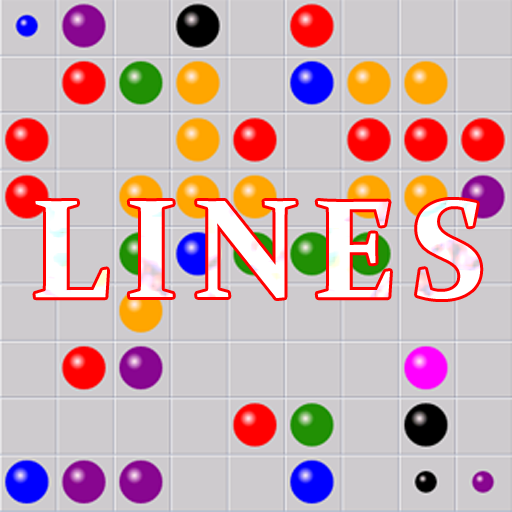
<style>
.page{position:relative;width:512px;height:512px;background:#cecbce}
.page>*{position:absolute;margin:0}
.t1{font:140px "Constantia-Bold";letter-spacing:0.1em;color:#ffffff}
</style>
<div class="page">
<p class="t1" style="left:35px;top:200px;width:446px;height:99px">LINES</p>
</div>
